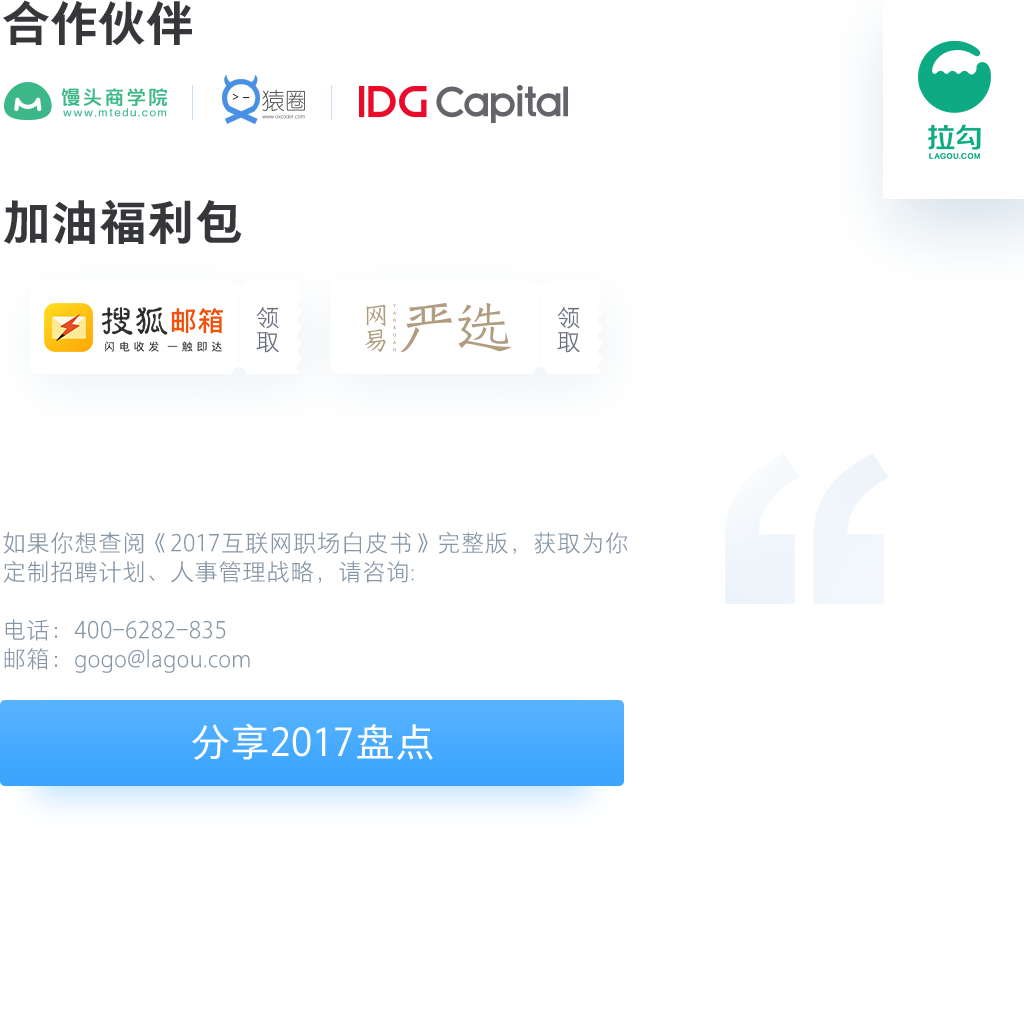
<style>
.page{position:relative;width:1024px;height:1024px;background:#ffffff}
.page>*{position:absolute;margin:0}
.t1{font:48px "FZYOUH_512B--GB1-4";color:#36373b}
.t2{font:24px "FZYOUH_504L--GB1-4";color:#686c7c}
.t3{font:24px/29px "FZYOUH_504L--GB1-4";color:#8495a5}
.t4{font:40px "FZYOUH_508R--GB1-4";color:#ffffff}
</style>
<div class="page">
<p class="t1" style="left:3px;top:0px;width:189px;height:46px">合作伙伴</p>
<p class="t1" style="left:3px;top:200px;width:239px;height:44px">加油福利包</p>
<p class="t2" style="left:256px;top:307px;width:23px;height:46px;text-align:center">领取</p>
<p class="t2" style="left:557px;top:307px;width:23px;height:46px;text-align:center">领取</p>
<p class="t3" style="left:3px;top:531px;width:625px;height:142px">如果你想查阅《2017互联网职场白皮书》完整版，获取为你定制招聘计划、人事管理战略，请咨询:<br><br>电话：400-6282-835<br>邮箱：gogo@lagou.com</p>
<p class="t4" style="left:191px;top:723px;width:242px;height:37px">分享2017盘点</p>
</div>
